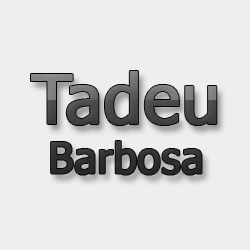
<style>
.page{position:relative;width:250px;height:250px;background:#eeeeee}
.page>*{position:absolute;margin:0}
.t1{font:42px "Tahoma";font-weight:bold}
.t2{font:68px "Tahoma";font-weight:bold}
</style>
<div class="page">
<p class="t1" style="left:31px;top:71px;width:186px;height:104px;text-align:center"><span class="t2">Tadeu<br></span>Barbosa</p>
</div>
